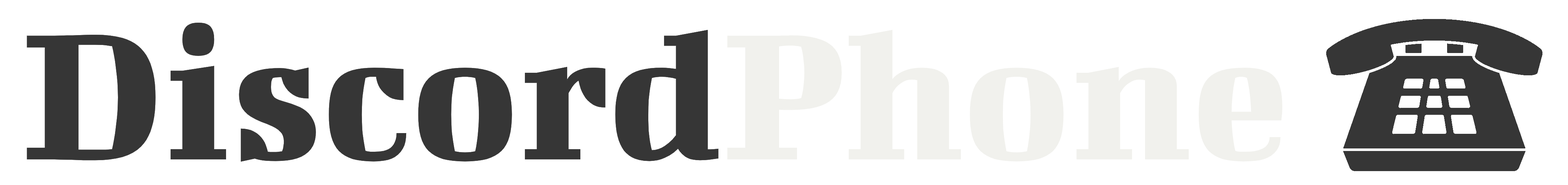
<style>
.page{position:relative;width:1568px;height:185px;background:#ffffff}
.page>*{position:absolute;margin:0}
.t1{font:200.9px "BigshotOne-Regular";color:#4d4d4d}
.t2{font:200.9px "BigshotOne-Regular";color:#363636}
.t3{font:200.9px "BigshotOne-Regular";color:#f1f1ed}
</style>
<div class="page">
<p class="t1" style="left:27px;top:22px;width:691px;height:140px">Discord</p>
<p class="t2" style="left:27px;top:22px;width:1255px;height:140px">Discord<span class="t3">Phone</span></p>
</div>
